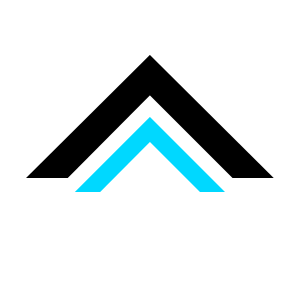
<style>
.page{position:relative;width:300px;height:300px;background:#ffffff}
.page>*{position:absolute;margin:0}
.t1{font:495.1px "Silom";color:#000000}
.t2{font:300px "Silom";color:#00d8ff}
</style>
<div class="page">
<p class="t1" style="left:26px;top:55px;width:248px;height:123px">^</p>
<p class="t2" style="left:74px;top:117px;width:151px;height:75px">^</p>
</div>
